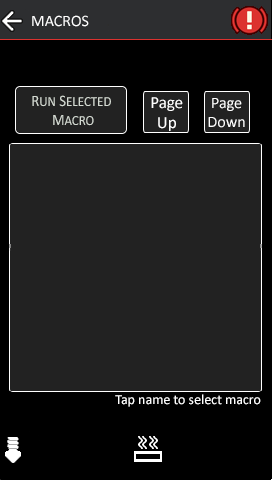
<style>
.page{position:relative;width:272px;height:480px;background:#222222}
.page>*{position:absolute;margin:0}
.t1{font:14px "Calibri";color:#d4dad2;scale:0.92 1}
.t2{font:16px "Calibri";color:#d4dad2;scale:0.92 1}
.t3{font:16.9px "Calibri";color:#ffffff}
.t4{font:16px "Calibri";color:#ffffff}
.t5{font:14px "Calibri";color:#ffffff}
</style>
<div class="page">
<p class="t1" style="left:32px;top:95px;width:79px;height:31px;text-align:center"><span class="t2">R</span>UN<span class="t2"> S</span>ELECTED<span class="t2"> <br>M</span>ACRO</p>
<p class="t3" style="left:151px;top:97px;width:32px;height:34px;text-align:center">Page<br>Up</p>
<p class="t4" style="left:208px;top:98px;width:37px;height:30px;text-align:center">Page<br>Down</p>
<p class="t5" style="left:115px;top:394px;width:146px;height:13px">Tap name to select macro</p>
</div>
